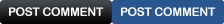
<style>
.page{position:relative;width:224px;height:24px;background:#29568f}
.page>*{position:absolute;margin:0}
.t1{font:12px "ArialRoundedMTBold";letter-spacing:-0.025em;color:#ffffff}
</style>
<div class="page">
<p class="t1" style="left:9px;top:7px;width:95px;height:9px">POST COMMENT</p>
<p class="t1" style="left:121px;top:7px;width:95px;height:9px">POST COMMENT</p>
</div>
